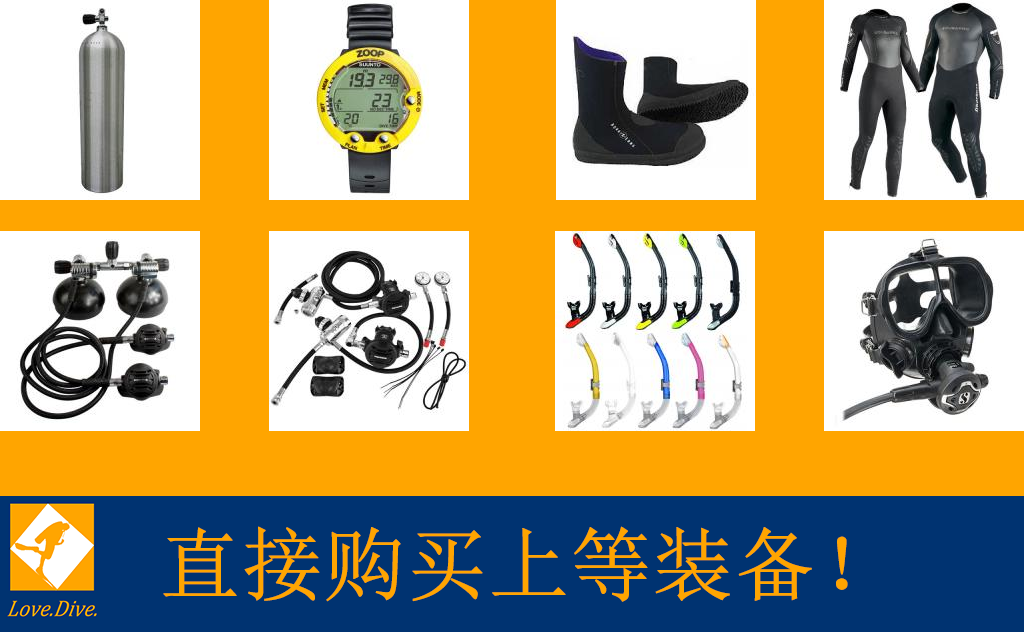
<style>
.page{position:relative;width:1024px;height:632px;background:#ffa500}
.page>*{position:absolute;margin:0}
.t1{font:80px "SimSun";color:#ffa500;font-weight:bold}
</style>
<div class="page">
<p class="t1" style="left:163px;top:526px;width:685px;height:76px">直接购买上等装备！</p>
</div>
